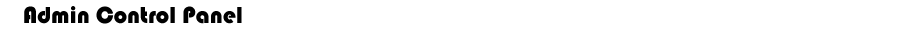
<style>
.page{position:relative;width:900px;height:30px;background:#ffffff}
.page>*{position:absolute;margin:0}
.t1{font:24px "Bauhaus93";color:#000000}
</style>
<div class="page">
<p class="t1" style="left:24px;top:6px;width:218px;height:18px">Admin Control Panel</p>
</div>
